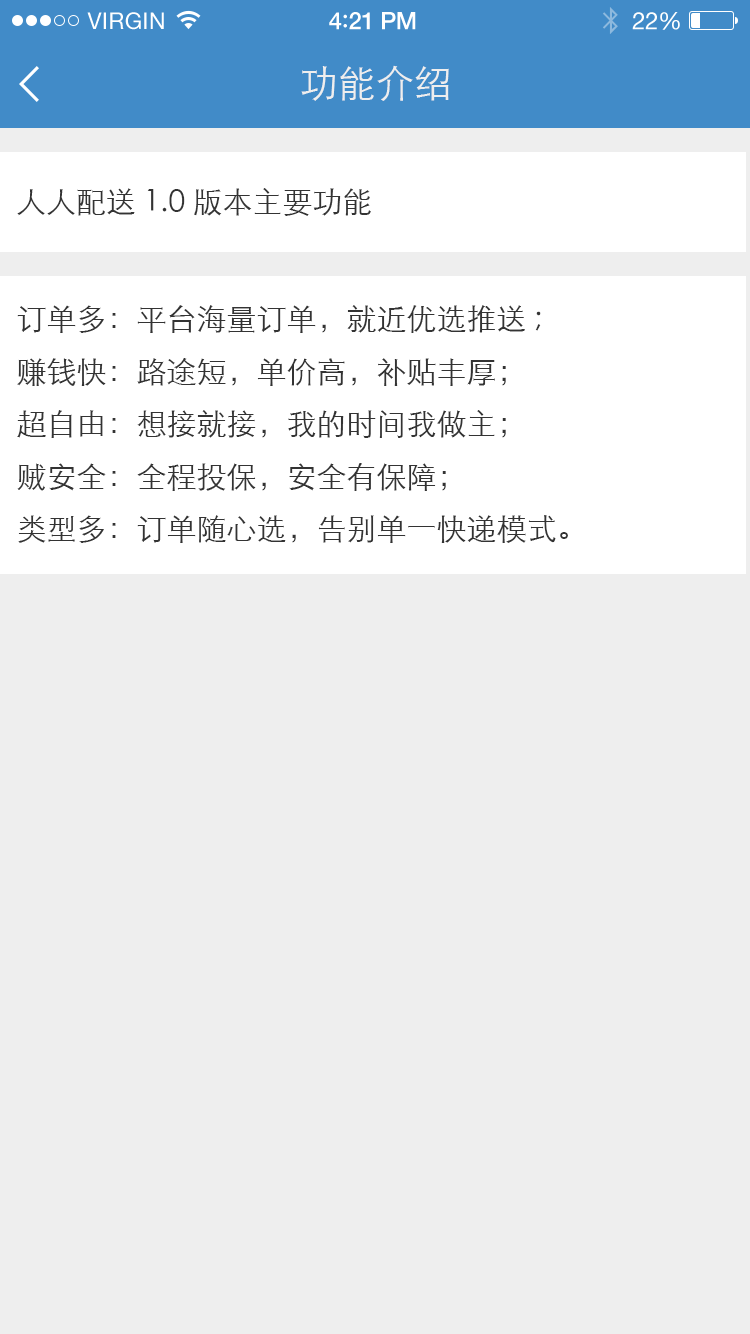
<style>
.page{position:relative;width:750px;height:1334px;background:#eeeeee}
.page>*{position:absolute;margin:0}
.t1{font:23px "HelveticaNeue";letter-spacing:0.02em;color:#ffffff}
.t2{font:24px "HelveticaNeue-Medium";letter-spacing:-0.02em;color:#ffffff}
.t3{font:26px "Avenir-Medium";letter-spacing:-0.02em;color:#ffffff}
.t4{font:24px "HelveticaNeue";letter-spacing:-0.02em;color:#ffffff}
.t5{font:38px "STXihei";color:#eeeeee}
.t6{font:30px "STXihei";color:#333333}
</style>
<div class="page">
<p class="t1" style="left:87px;top:12px;width:77px;height:18px">VIRGIN</p>
<p class="t2" style="left:329px;top:12px;width:87px;height:18px">4<span class="t3">:</span>21 PM</p>
<p class="t4" style="left:632px;top:12px;width:48px;height:18px">22%</p>
<p class="t5" style="left:301px;top:65px;width:148px;height:36px">功能介绍</p>
<p class="t6" style="left:17px;top:188px;width:354px;height:28px">人人配送1.0版本主要功能</p>
<p class="t6" style="left:17px;top:305px;width:551px;height:238px">订单多：平台海量订单，就近优选推送;<br>赚钱快：路途短，单价高，补贴丰厚；<br>超自由：想接就接，我的时间我做主；<br>贼安全：全程投保，安全有保障；<br>类型多：订单随心选，告别单一快递模式。</p>
</div>
